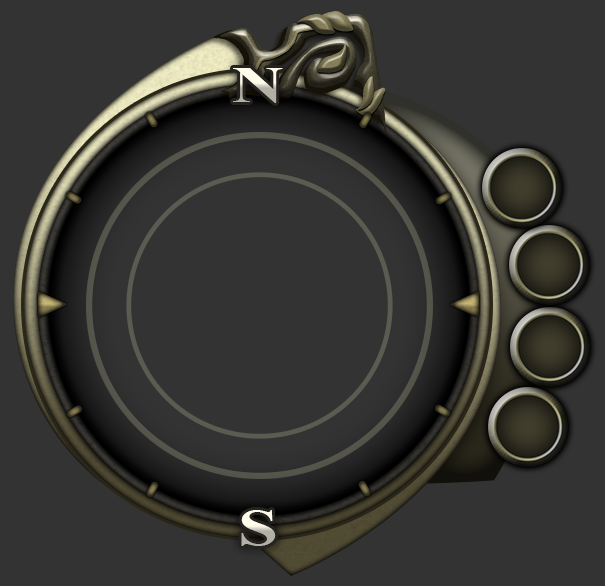
<style>
.page{position:relative;width:605px;height:586px;background:#333333}
.page>*{position:absolute;margin:0}
.t1{font:51.3px "TimesNewRomanPS-BoldMT";scale:1.41 1}
</style>
<div class="page">
<p class="t1" style="left:233px;top:68px;width:50px;height:35px">N</p>
<p class="t1" style="left:241px;top:510px;width:35px;height:36px">S</p>
</div>
